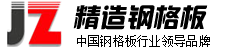
<style>
.page{position:relative;width:234px;height:48px;background:#ffffff}
.page>*{position:absolute;margin:0}
.t1{font:26px "¹ã½Ý¾ÓÃÔÄã×Ö¿â";letter-spacing:0.025em;color:#000000;font-style:italic}
.t2{font:12px "SimSun";letter-spacing:0.025em;color:#000000}
</style>
<div class="page">
<p class="t1" style="left:73px;top:5px;width:135px;height:25px">精造钢格板</p>
<p class="t2" style="left:77px;top:35px;width:133px;height:12px">中国钢格板行业领导品牌</p>
</div>
